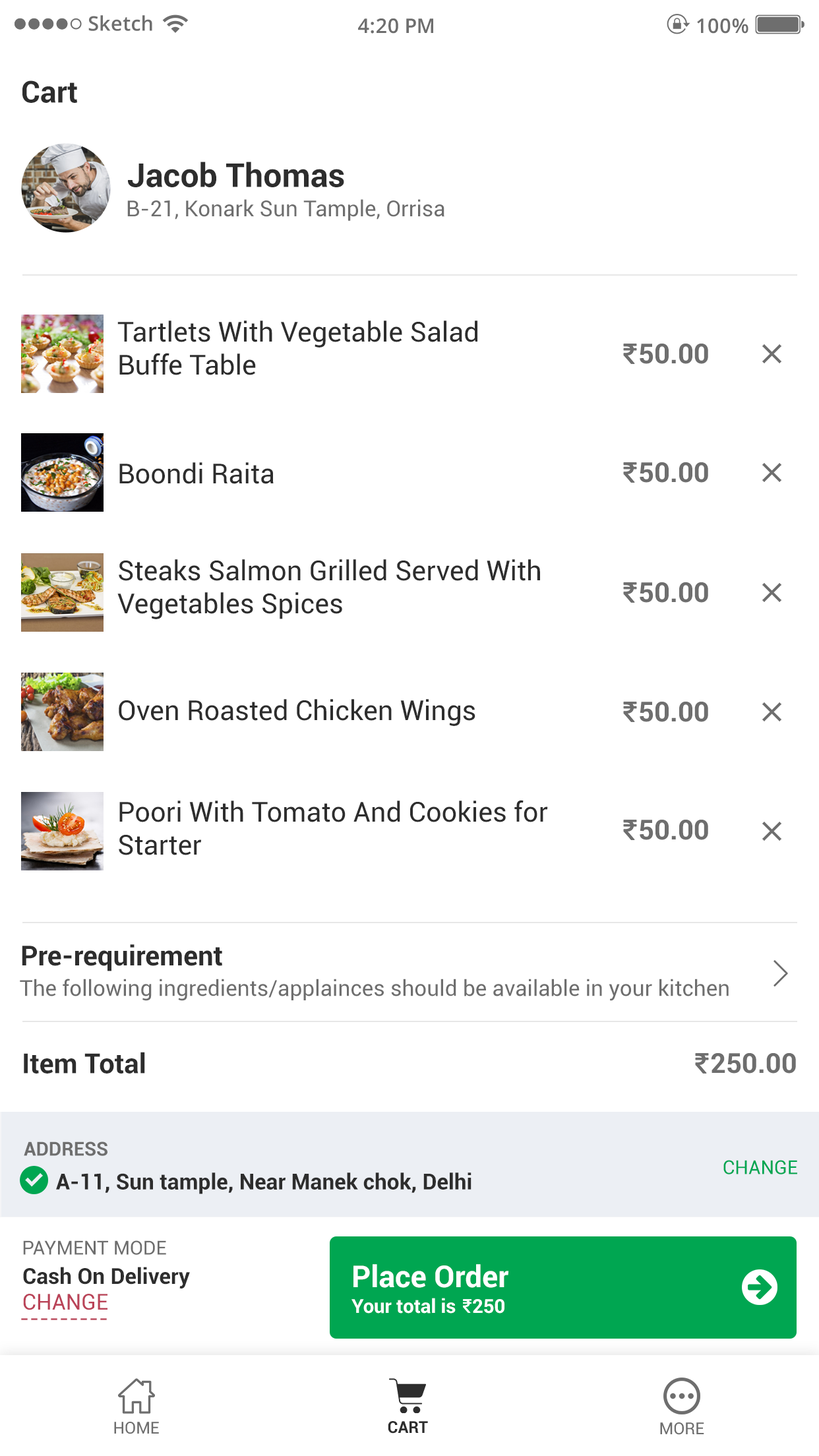
<style>
.page{position:relative;width:819px;height:1456px;background:#ffffff}
.page>*{position:absolute;margin:0}
.t1{font:20.1px "OpenSans-Semibold";color:#6e6e6e}
.t2{font:30.2px "Roboto-Bold";color:#2d2d2d}
.t3{font:33px "Roboto-Bold";color:#2d2d2d}
.t4{font:22px "Roboto-Regular";color:#6e6e6e}
.t5{font:27.5px "Roboto-Regular";color:#2d2d2d}
.t6{font:27.5px "Roboto-Bold";color:#6e6e6e}
.t7{font:27.5px "Roboto-Bold";color:#2d2d2d}
.t8{font:19.2px "Roboto-Bold";color:#6e6e6e}
.t9{font:19.2px "Roboto-Regular";color:#00a651}
.t10{font:22px "Roboto-Bold";color:#2d2d2d}
.t11{font:19.2px "Roboto-Regular";color:#6e6e6e}
.t12{font:30.2px "Roboto-Bold";color:#ffffff}
.t13{font:22px "Roboto-Regular";color:#ba4358}
.t14{font:19.2px "Roboto-Bold";color:#ffffff}
.t15{font:16.5px "Roboto-Regular";color:#6e6e6e;text-transform:uppercase}
.t16{font:16.5px "Roboto-Bold";color:#2d2d2d;text-transform:uppercase}
</style>
<div class="page">
<p class="t1" style="left:88px;top:15px;width:64px;height:16px">Sketch</p>
<p class="t1" style="left:358px;top:18px;width:75px;height:16px">4:20 PM</p>
<p class="t1" style="left:697px;top:18px;width:51px;height:16px">100%</p>
<p class="t2" style="left:22px;top:80px;width:55px;height:23px">Cart</p>
<p class="t3" style="left:128px;top:162px;width:216px;height:25px">Jacob Thomas</p>
<p class="t4" style="left:127px;top:199px;width:317px;height:22px">B-21, Konark Sun Tample, Orrisa</p>
<p class="t5" style="left:117px;top:320px;width:360px;height:55px">Tartlets With Vegetable Salad<br>Buffe Table</p>
<p class="t6" style="left:640px;top:344px;width:68px;height:20px">50.00</p>
<p class="t5" style="left:119px;top:462px;width:155px;height:22px">Boondi Raita</p>
<p class="t6" style="left:640px;top:462px;width:68px;height:21px">50.00</p>
<p class="t5" style="left:117px;top:559px;width:423px;height:60px">Steaks Salmon Grilled Served With<br>Vegetables Spices</p>
<p class="t6" style="left:640px;top:582px;width:68px;height:21px">50.00</p>
<p class="t5" style="left:119px;top:699px;width:356px;height:27px">Oven Roasted Chicken Wings</p>
<p class="t6" style="left:640px;top:702px;width:68px;height:20px">50.00</p>
<p class="t5" style="left:119px;top:800px;width:429px;height:55px">Poori With Tomato And Cookies for <br>Starter</p>
<p class="t6" style="left:640px;top:820px;width:68px;height:20px">50.00</p>
<p class="t7" style="left:22px;top:944px;width:200px;height:27px">Pre-requirement</p>
<p class="t4" style="left:20px;top:979px;width:709px;height:22px">The following ingredients/applainces should be available in your kitchen</p>
<p class="t7" style="left:24px;top:1052px;width:121px;height:22px">Item Total</p>
<p class="t6" style="left:711px;top:1053px;width:85px;height:21px">250.00</p>
<p class="t8" style="left:24px;top:1141px;width:83px;height:15px">ADDRESS</p>
<p class="t9" style="left:723px;top:1160px;width:74px;height:14px">CHANGE</p>
<p class="t10" style="left:56px;top:1172px;width:415px;height:22px">A-11, Sun tample, Near Manek chok, Delhi</p>
<p class="t11" style="left:23px;top:1240px;width:143px;height:15px">PAYMENT MODE</p>
<p class="t12" style="left:353px;top:1264px;width:156px;height:24px">Place Order</p>
<p class="t10" style="left:23px;top:1267px;width:167px;height:21px">Cash On Delivery</p>
<p class="t13" style="left:23px;top:1294px;width:84px;height:16px">CHANGE</p>
<p class="t14" style="left:351px;top:1298px;width:105px;height:16px">Your total is</p>
<p class="t14" style="left:473px;top:1299px;width:31px;height:15px">250</p>
<p class="t13" style="left:21px;top:1318px;width:86px;height:2px">---------</p>
<p class="t15" style="left:114px;top:1422px;width:45px;height:12px">Home</p>
<p class="t16" style="left:388px;top:1421px;width:40px;height:13px">Cart</p>
<p class="t15" style="left:660px;top:1422px;width:44px;height:13px">More</p>
</div>
